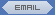
<style>
.page{position:relative;width:55px;height:15px;background:#5176b5}
.page>*{position:absolute;margin:0}
.t1{font:8px "BitDustTwo";color:#666666}
</style>
<div class="page">
<p class="t1" style="left:15px;top:5px;width:25px;height:5px">EMAIL</p>
</div>
